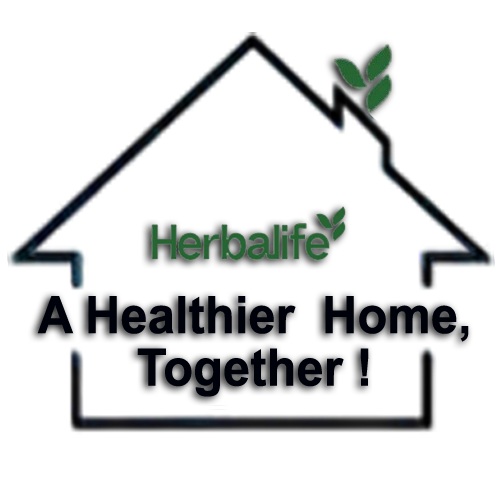
<style>
.page{position:relative;width:500px;height:500px;background:#ffffff}
.page>*{position:absolute;margin:0}
.t1{font:51.7px/52.4px "Arial-BoldMT";color:#00020b;scale:0.95 1}
</style>
<div class="page">
<p class="t1" style="left:37px;top:296px;width:432px;height:101px;text-align:center">A Healthier  Home,<br>Together !</p>
</div>
